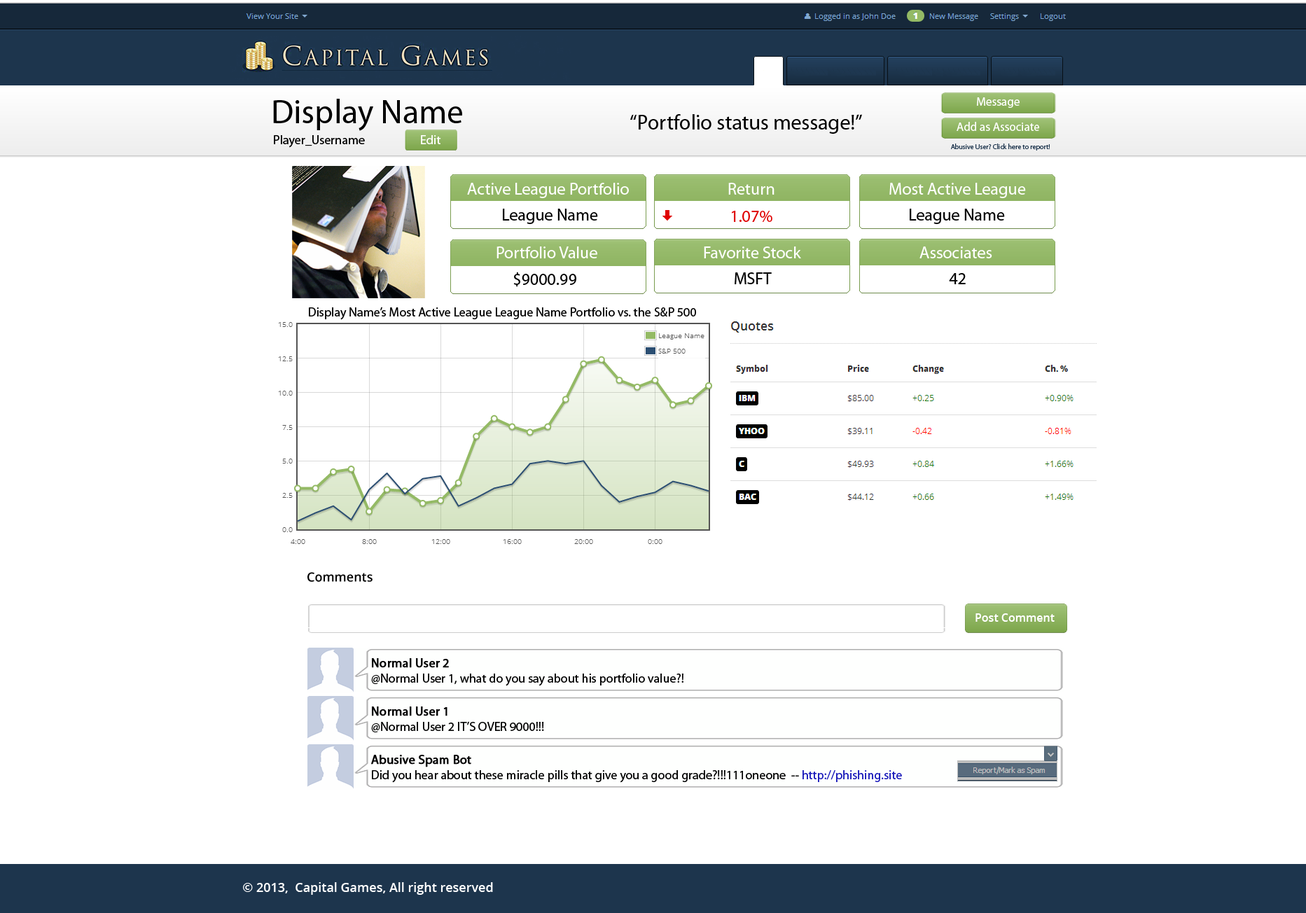
<style>
.page{position:relative;width:1306px;height:913px;background:#ffffff}
.page>*{position:absolute;margin:0}
.t1{font:33.6px "MyriadPro-Regular";color:#000000}
.t2{font:11.9px "MyriadPro-Regular";color:#ffffff}
.t3{font:21px "MyriadPro-Regular";color:#000000}
.t4{font:12.6px "MyriadPro-Regular";color:#000000}
.t5{font:12.6px "MyriadPro-Regular";color:#ffffff}
.t6{font:7px "MyriadPro-Regular";color:#1d354d}
.t7{font:16.8px "MyriadPro-Regular";color:#ffffff}
.t8{font:16.8px "MyriadPro-Regular";color:#000000}
.t9{font:16.8px "MyriadPro-Regular";color:#df0000}
.t10{font:12.6px "OpenSans-Semibold";color:#000000}
.t11{font:11.2px "OpenSans-Semibold";color:#ffffff}
.t12{font:12.6px "MyriadPro-Regular";color:#000000;font-weight:bold}
.t13{font:12.6px "MyriadPro-Regular";color:#1818ba}
.t14{font:12.6px "OpenSans-Semibold";color:#ffffff}
</style>
<div class="page">
<p class="t1" style="left:273px;top:99px;width:189px;height:32px">Display Name</p>
<p class="t2" style="left:977px;top:97px;width:43px;height:11px">Message</p>
<p class="t3" style="left:630px;top:114px;width:232px;height:20px">“Portfolio status message!”</p>
<p class="t2" style="left:957px;top:122px;width:82px;height:9px">Add as Associate</p>
<p class="t4" style="left:274px;top:135px;width:91px;height:13px">Player_Username</p>
<p class="t5" style="left:421px;top:135px;width:20px;height:9px">Edit</p>
<p class="t6" style="left:951px;top:144px;width:99px;height:7px">Abusive User? Click here to report!</p>
<p class="t7" style="left:467px;top:183px;width:162px;height:15px">Active League Portfolio</p>
<p class="t7" style="left:728px;top:183px;width:46px;height:12px">Return</p>
<p class="t7" style="left:889px;top:183px;width:137px;height:15px">Most Active League</p>
<p class="t8" style="left:503px;top:209px;width:95px;height:15px">League Name</p>
<p class="t8" style="left:910px;top:209px;width:95px;height:15px">League Name</p>
<p class="t9" style="left:732px;top:211px;width:40px;height:11px">1.07%</p>
<p class="t7" style="left:496px;top:246px;width:101px;height:12px">Portfolio Value</p>
<p class="t7" style="left:704px;top:246px;width:97px;height:12px">Favorite Stock</p>
<p class="t7" style="left:919px;top:246px;width:73px;height:12px">Associates</p>
<p class="t8" style="left:513px;top:272px;width:63px;height:15px">$9000.99</p>
<p class="t8" style="left:735px;top:272px;width:37px;height:12px">MSFT</p>
<p class="t8" style="left:949px;top:273px;width:17px;height:11px">42</p>
<p class="t4" style="left:309px;top:307px;width:387px;height:13px">Display Name’s Most Active League League Name Portfolio vs. the S&amp;P 500</p>
<p class="t10" style="left:307px;top:572px;width:66px;height:10px">Comments</p>
<p class="t11" style="left:975px;top:613px;width:80px;height:9px">Post Comment</p>
<p class="t4" style="left:371px;top:658px;width:312px;height:28px"><span class="t12">Normal User 2 <br></span>@Normal User 1, what do you say about his portfolio value?!</p>
<p class="t4" style="left:371px;top:707px;width:173px;height:25px"><span class="t12">Normal User 1<br></span>@Normal User 2 IT’S OVER 9000!!!</p>
<p class="t4" style="left:371px;top:755px;width:531px;height:28px"><span class="t12">Abusive Spam Bot<br></span>Did you hear about these miracle pills that give you a good grade?!!!111oneone  -- <span class="t13">http://phishing.site</span></p>
<p class="t14" style="left:243px;top:882px;width:250px;height:13px">© 2013,  Capital Games, All right reserved</p>
</div>
